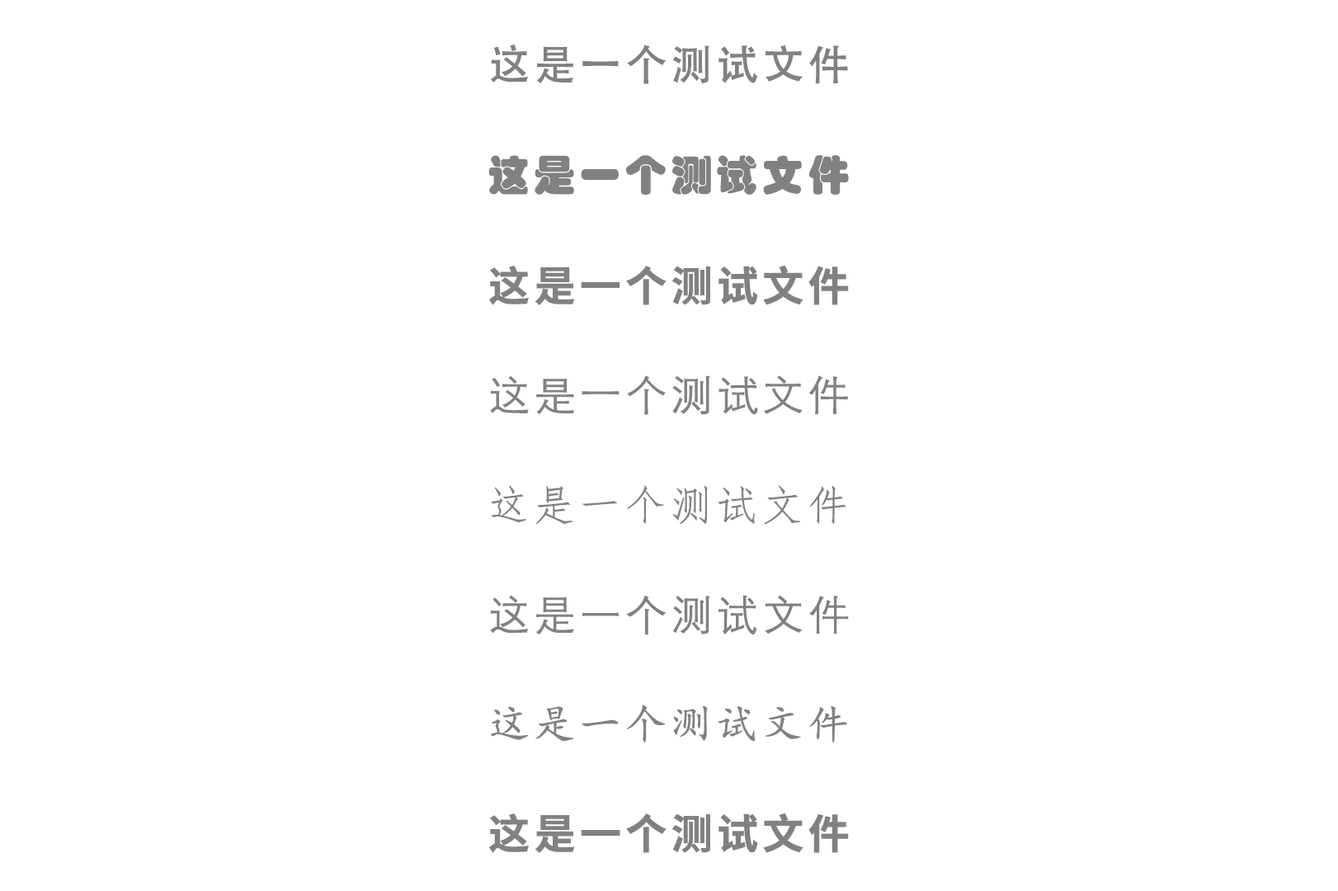
<style>
.page{position:relative;width:1338px;height:891px;background:#ffffff}
.page>*{position:absolute;margin:0}
.t1{font:41.3px "AdobeHeitiStd-Regular";letter-spacing:0.08em;color:#818181;font-weight:bold}
.t2{font:41.3px "STHupo";letter-spacing:0.08em;color:#818181;font-weight:bold}
.t3{font:41.3px "SourceHanSansCN-Bold";letter-spacing:0.08em;color:#818181;font-weight:bold}
.t4{font:41.3px "STXihei";letter-spacing:0.08em;color:#818181;font-weight:bold}
.t5{font:41.3px "FangSong";letter-spacing:0.08em;color:#818181;font-weight:bold}
.t6{font:41.3px "DengXian";letter-spacing:0.08em;color:#818181;font-weight:bold}
.t7{font:41.3px "KaiTi";letter-spacing:0.08em;color:#818181;font-weight:bold}
</style>
<div class="page">
<p class="t1" style="left:491px;top:45px;width:357px;height:39px">这是一个测试文件</p>
<p class="t2" style="left:488px;top:155px;width:361px;height:40px">这是一个测试文件</p>
<p class="t3" style="left:489px;top:265px;width:360px;height:40px">这是一个测试文件</p>
<p class="t4" style="left:490px;top:375px;width:358px;height:40px">这是一个测试文件</p>
<p class="t5" style="left:491px;top:485px;width:356px;height:40px">这是一个测试文件</p>
<p class="t6" style="left:490px;top:595px;width:359px;height:40px">这是一个测试文件</p>
<p class="t7" style="left:490px;top:705px;width:357px;height:38px">这是一个测试文件</p>
<p class="t3" style="left:489px;top:813px;width:360px;height:40px">这是一个测试文件</p>
</div>
